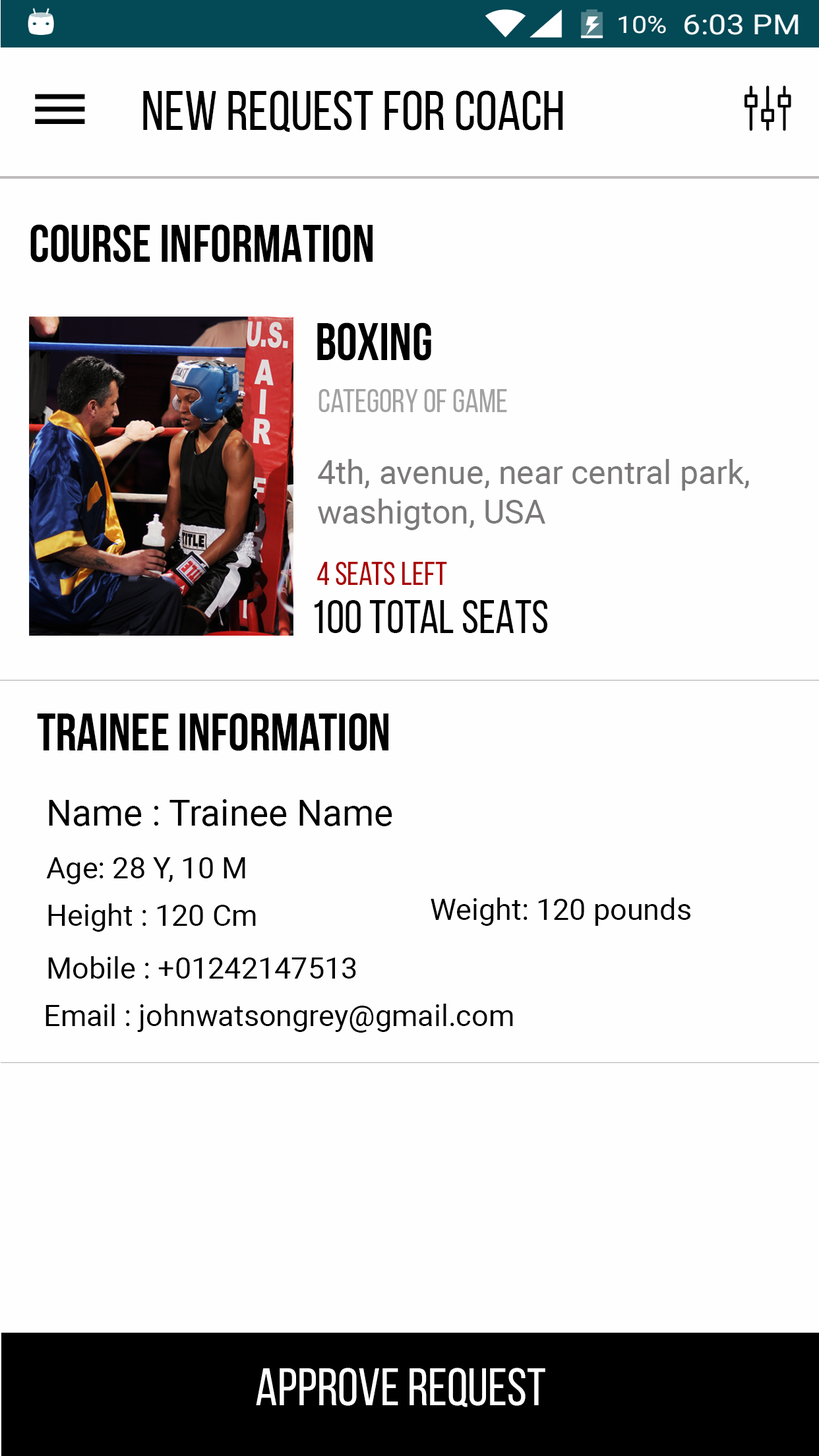
<style>
.page{position:relative;width:819px;height:1456px;background:#fefefe}
.page>*{position:absolute;margin:0}
.t1{font:56px "BebasNeueRegular";color:#010101}
.t2{font:52.8px "TestN-TestNBold";color:#000000}
.t3{font:33px "TestN-TestNRegular";color:#a3a2a2}
.t4{font:33px "Roboto-Regular";color:#7b7979}
.t5{font:33px "BebasNeueRegular";color:#aa0505}
.t6{font:46.2px "BebasNeueRegular";color:#020202}
.t7{font:36.3px "Roboto-Regular";color:#000000}
.t8{font:29.7px "Roboto-Regular";color:#000000}
.t9{font:52.8px "TestN-TestNRegular";color:#fefefe}
</style>
<div class="page">
<p class="t1" style="left:143px;top:90px;width:420px;height:42px">NEW REQUEST for coach</p>
<p class="t2" style="left:30px;top:224px;width:343px;height:38px">COURSE INFORMATION</p>
<p class="t2" style="left:317px;top:322px;width:114px;height:39px">BOXING</p>
<p class="t3" style="left:318px;top:389px;width:189px;height:23px">category of game</p>
<p class="t4" style="left:318px;top:459px;width:431px;height:71px">4th, avenue, near central park, <br>washigton, USA</p>
<p class="t5" style="left:317px;top:562px;width:130px;height:23px">4 seats left</p>
<p class="t6" style="left:315px;top:600px;width:233px;height:33px">100 TOTAL SEATS</p>
<p class="t2" style="left:37px;top:713px;width:351px;height:38px">Trainee Information</p>
<p class="t7" style="left:49px;top:799px;width:343px;height:27px">Name : Trainee Name</p>
<p class="t8" style="left:46px;top:857px;width:199px;height:27px">Age: 28 Y, 10 M</p>
<p class="t8" style="left:48px;top:903px;width:208px;height:29px">Height : 120 Cm</p>
<p class="t8" style="left:431px;top:897px;width:259px;height:29px">Weight: 120 pounds</p>
<p class="t8" style="left:48px;top:956px;width:308px;height:23px">Mobile : +01242147513</p>
<p class="t8" style="left:45px;top:1004px;width:468px;height:29px">Email : johnwatsongrey@gmail.com</p>
<p class="t9" style="left:256px;top:1368px;width:289px;height:39px">APPROVE REquest</p>
</div>
